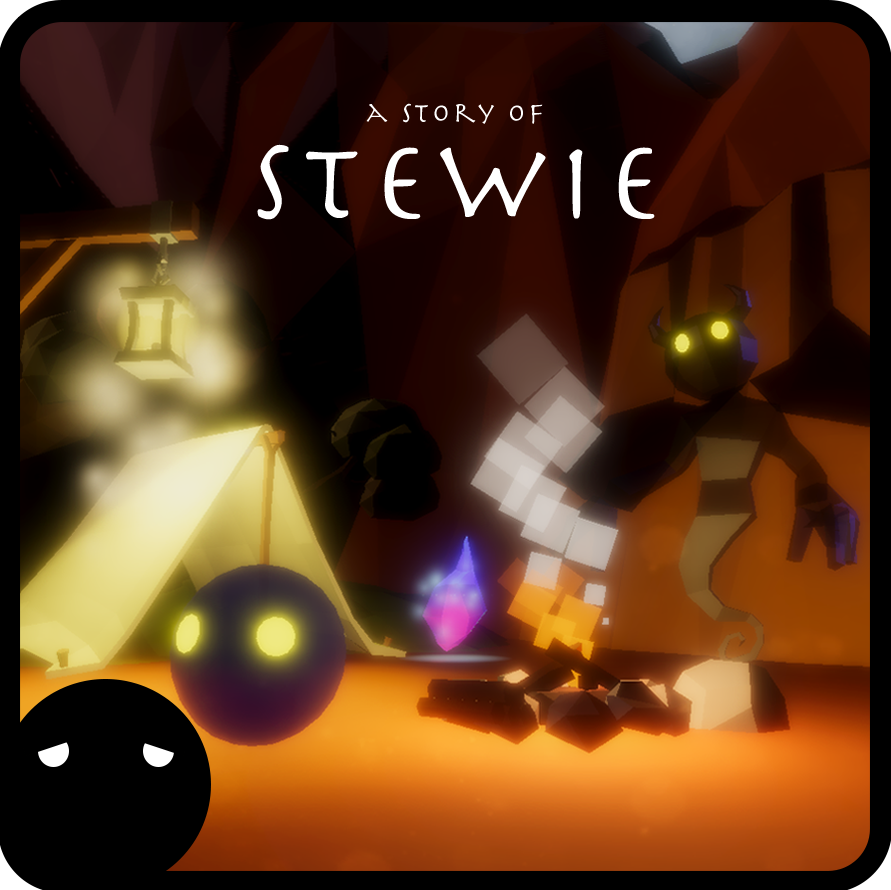
<style>
.page{position:relative;width:891px;height:890px}
.page>*{position:absolute;margin:0}
.t1{font:28.5px/94.8px "Herculanum";letter-spacing:0.1em;color:#ffffff}
.t2{font:113.8px/94.8px "Herculanum";letter-spacing:0.1em;color:#ffffff}
</style>
<div class="page">
<p class="t1" style="left:257px;top:103px;width:398px;height:117px;text-align:center">a story of<br><span class="t2">Stewie</span></p>
</div>
